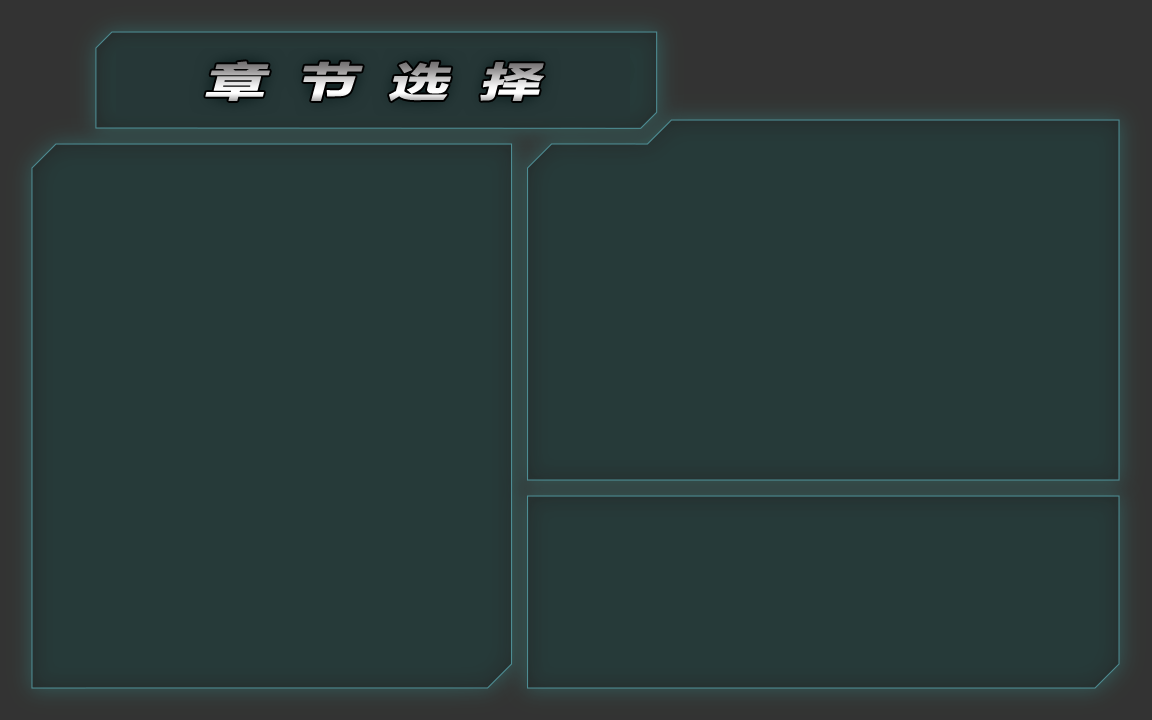
<style>
.page{position:relative;width:1152px;height:720px;background:#263a39}
.page>*{position:absolute;margin:0}
.t1{font:40px "MicrosoftYaHei-Bold";letter-spacing:0.5em;font-weight:bold;font-style:italic;scale:1.5 1}
</style>
<div class="page">
<p class="t1" style="left:205px;top:61px;width:339px;height:41px">章节选择</p>
</div>
